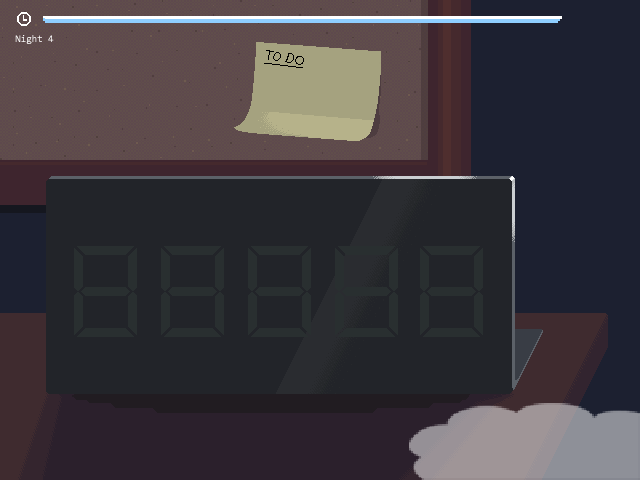
<style>
.page{position:relative;width:640px;height:480px;background:#222429}
.page>*{position:absolute;margin:0}
.t1{font:10px "Consolas";color:#ffffff}
</style>
<div class="page">
<p class="t1" style="left:15px;top:35px;width:39px;height:9px">Night 4</p>
</div>
